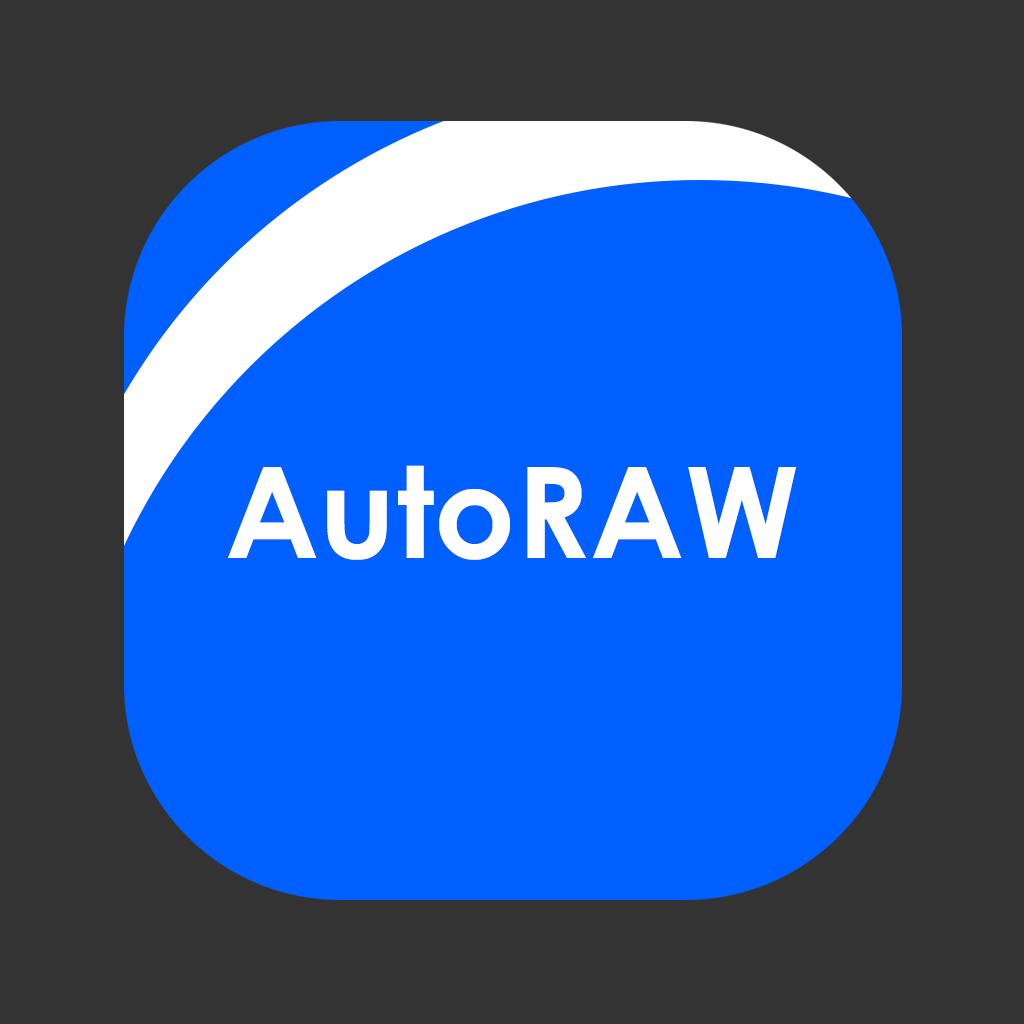
<style>
.page{position:relative;width:1024px;height:1024px;background:#333333}
.page>*{position:absolute;margin:0}
.t1{font:126.7px "CenturyGothic-Bold";color:#ffffff}
</style>
<div class="page">
<p class="t1" style="left:228px;top:465px;width:568px;height:95px">AutoRAW</p>
</div>
